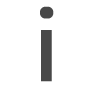
<style>
.page{position:relative;width:88px;height:88px;background:#ffffff}
.page>*{position:absolute;margin:0}
.t1{font:100px "SegoeUI";color:#484848;font-weight:bold}
</style>
<div class="page">
<p class="t1" style="left:40px;top:6px;width:14px;height:76px">i</p>
</div>
